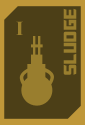
<style>
.page{position:relative;width:85px;height:125px;background:#4c3f17}
.page>*{position:absolute;margin:0}
.t1{font:20px "TransformersMovie";letter-spacing:0.04em;color:#997e2e}
.t2{font:20px "TimesNewRomanPS-BoldMT";letter-spacing:-0.04em;color:#997e2e}
</style>
<div class="page">
<p class="t1" style="left:63px;top:8px;width:14px;height:67px;rotate:-90deg">sludge</p>
<p class="t2" style="left:16px;top:21px;width:7px;height:14px">I</p>
</div>
